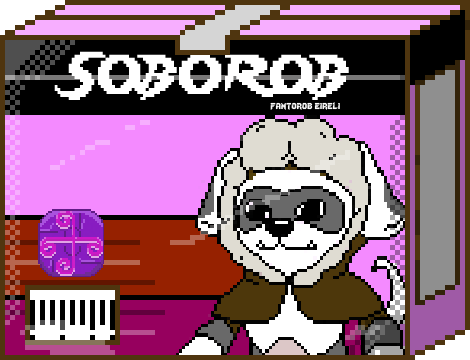
<style>
.page{position:relative;width:470px;height:360px}
.page>*{position:absolute;margin:0}
.t1{font:48.3px "Lady-Radical";color:#ffffff;scale:0.93 1}
.t2{font:12px "Lady-Radical";color:#fbfbfb}
</style>
<div class="page">
<p class="t1" style="left:54px;top:51px;width:295px;height:49px">SOBOROB</p>
<p class="t2" style="left:270px;top:102px;width:70px;height:8px">fantorob eireli</p>
</div>
